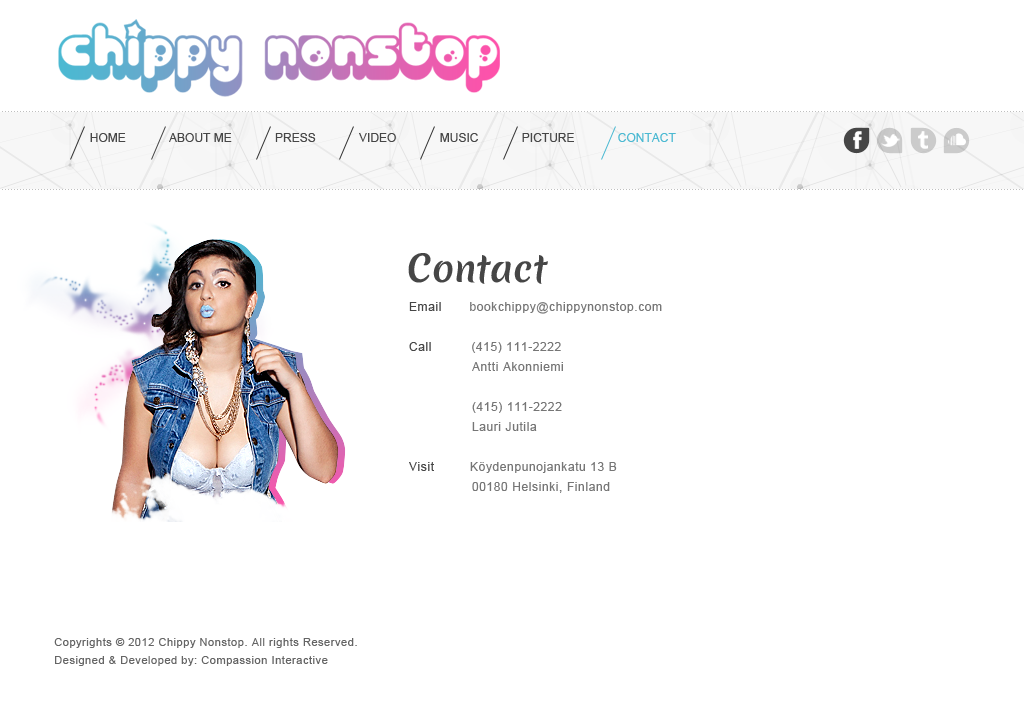
<style>
.page{position:relative;width:1024px;height:710px;background:#ffffff}
.page>*{position:absolute;margin:0}
.t1{font:12px "ArialMT";color:#464646}
.t2{font:12px "ArialMT";color:#4bb9d2}
.t3{font:36px "MeriendaOne-Regular";color:#464646}
.t4{font:12px/20px "ArialMT";letter-spacing:0.05em;color:#767676}
.t5{font:12px/20px "ArialMT";letter-spacing:0.05em;color:#464646}
.t6{font:11px/18px "ArialMT";letter-spacing:0.05em;color:#656565}
</style>
<div class="page">
<p class="t1" style="left:90px;top:133px;width:586px;height:9px">HOME             ABOUT ME             PRESS             VIDEO             MUSIC             PICTURE             <span class="t2">CONTACT</span></p>
<p class="t3" style="left:408px;top:253px;width:140px;height:31px">Contact</p>
<p class="t4" style="left:409px;top:302px;width:253px;height:191px"><span class="t5">Email       </span>bookchippy@chippynonstop.com<br><span class="t5"><br>Call          </span>(415) 111-2222<br>                Antti Akonniemi<br><br>                (415) 111-2222<br>                Lauri Jutila<br><span class="t5"><br>Visit         </span>Köydenpunojankatu 13 B<br>                00180 Helsinki, Finland</p>
<p class="t6" style="left:54px;top:638px;width:303px;height:28px">Copyrights © 2012 Chippy Nonstop. All rights Reserved.<br>Designed &amp; Developed by: Compassion Interactive</p>
</div>
